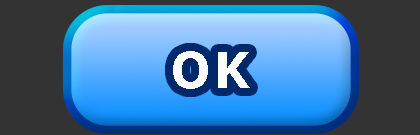
<style>
.page{position:relative;width:420px;height:135px;background:#333333}
.page>*{position:absolute;margin:0}
.t1{font:50px "Tahoma-Bold";letter-spacing:0.1em;color:#ffffff}
</style>
<div class="page">
<p class="t1" style="left:173px;top:51px;width:77px;height:38px">OK</p>
</div>
